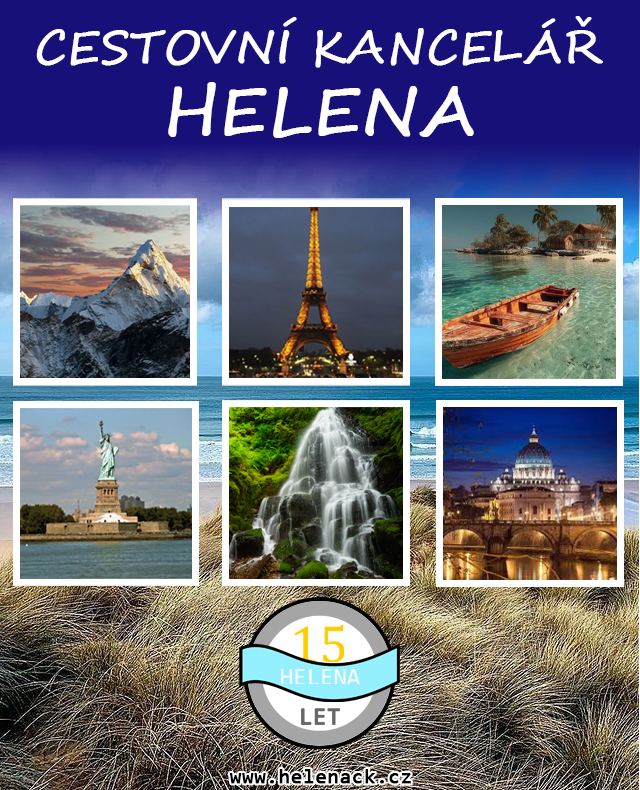
<style>
.page{position:relative;width:640px;height:790px}
.page>*{position:absolute;margin:0}
.t1{font:45px "SegoeScript";color:#ffffff;font-weight:bold}
.t2{font:65px "SegoeScript";color:#ffffff;font-weight:bold}
.t3{font:21.1px "Consolas";color:#000000;font-weight:bold}
</style>
<div class="page">
<p class="t1" style="left:36px;top:16px;width:567px;height:52px">CESTOVNÍ KANCELÁŘ</p>
<p class="t2" style="left:168px;top:82px;width:306px;height:56px">HELENA</p>
<p class="t3" style="left:229px;top:769px;width:182px;height:15px">www.helenack.cz</p>
</div>
